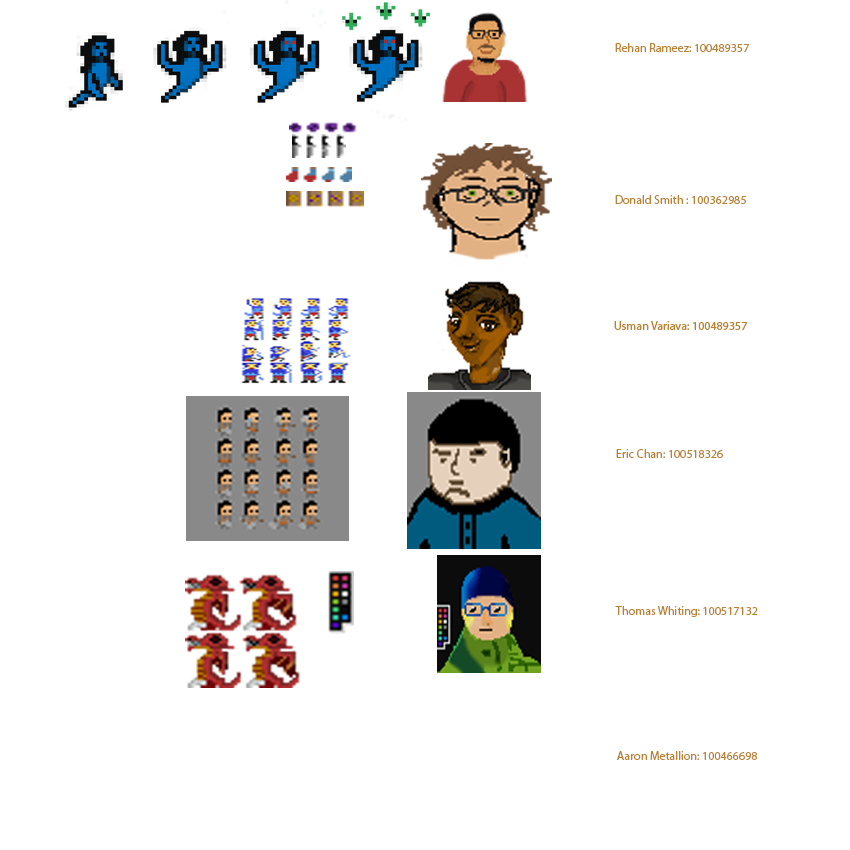
<style>
.page{position:relative;width:850px;height:850px;background:#ffffff}
.page>*{position:absolute;margin:0}
.t1{font:12px "MyriadPro-Regular";color:#ba8333}
</style>
<div class="page">
<p class="t1" style="left:615px;top:43px;width:134px;height:9px">Rehan Rameez: 100489357</p>
<p class="t1" style="left:615px;top:195px;width:131px;height:9px">Donald Smith : 100362985</p>
<p class="t1" style="left:616px;top:449px;width:107px;height:9px">Eric Chan: 100518326</p>
<p class="t1" style="left:615px;top:606px;width:143px;height:11px">Thomas Whiting: 100517132</p>
<p class="t1" style="left:617px;top:751px;width:140px;height:9px">Aaron Metallion: 100466698</p>
</div>
